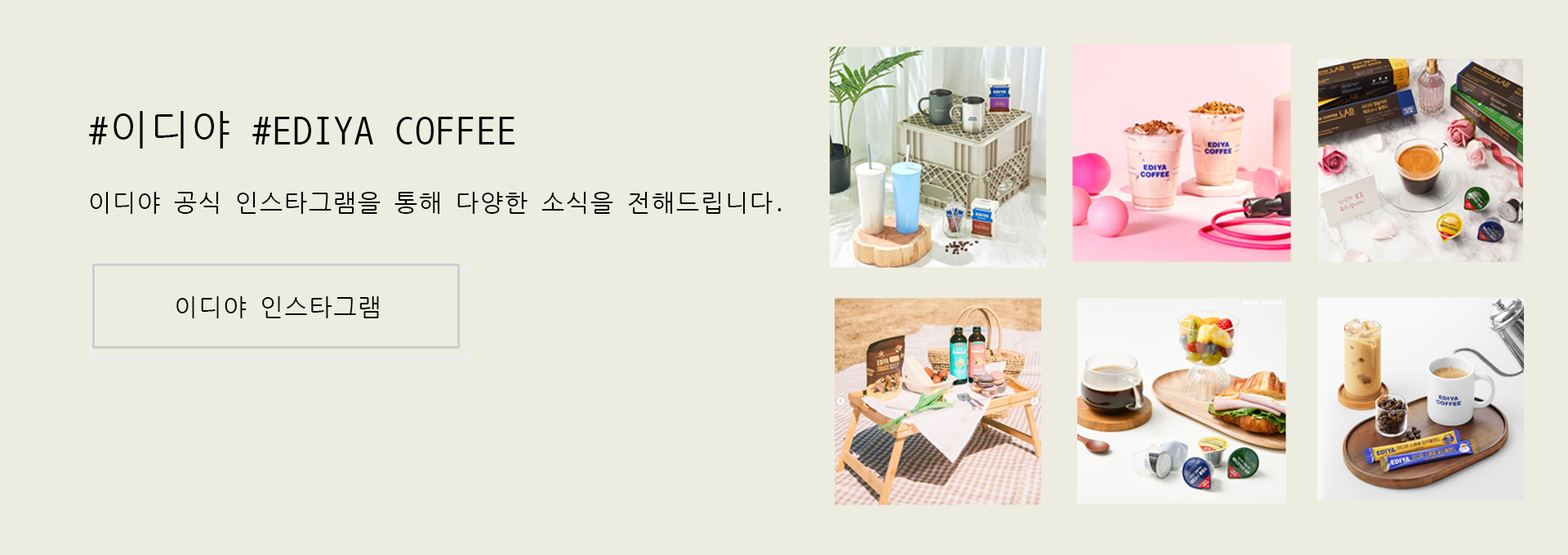
<style>
.page{position:relative;width:1568px;height:555px;background:#edece0}
.page>*{position:absolute;margin:0}
.t1{font:40.8px "NanumGothicCoding";color:#040404}
.t2{font:24.5px "NanumGothicCoding";color:#040404}
</style>
<div class="page">
<p class="t1" style="left:89px;top:111px;width:425px;height:38px">#이디야 #EDIYA COFFEE</p>
<p class="t2" style="left:90px;top:192px;width:692px;height:22px">이디야 공식 인스타그램을 통해 다양한 소식을 전해드립니다.</p>
<p class="t2" style="left:176px;top:296px;width:203px;height:22px">이디야 인스타그램</p>
</div>
